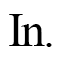
<style>
.page{position:relative;width:57px;height:57px;background:#ffffff}
.page>*{position:absolute;margin:0}
.t1{font:47.5px "TimesNewRomanPSMT";letter-spacing:-0.05em;color:#000000}
</style>
<div class="page">
<p class="t1" style="left:9px;top:14px;width:43px;height:33px">In.</p>
</div>
